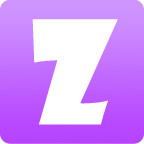
<style>
.page{position:relative;width:144px;height:144px;background:#ffffff}
.page>*{position:absolute;margin:0}
.t1{font:139.9px "ShowcardGothic-Reg";color:#ffffff}
</style>
<div class="page">
<p class="t1" style="left:32px;top:19px;width:86px;height:106px">Z</p>
</div>
